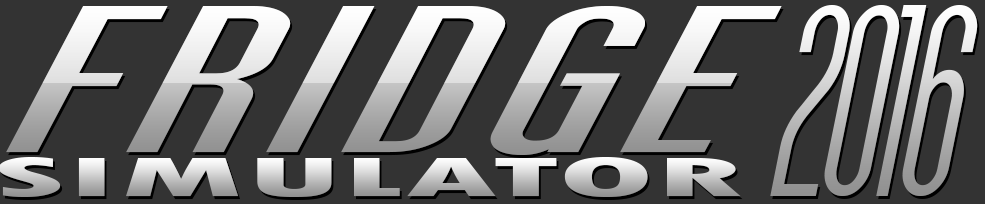
<style>
.page{position:relative;width:985px;height:204px;background:#333333}
.page>*{position:absolute;margin:0}
.t1{font:216.8px "SFMoviePoster-BoldOblique";letter-spacing:0.054em;scale:2.45 1}
.t2{font:286.6px "SFMoviePoster-Oblique";letter-spacing:-0.04em;scale:0.95 1}
.t3{font:58.9px "TwCenMT-CondensedExtraBold";scale:2.92 1}
</style>
<div class="page">
<p class="t1" style="left:6px;top:6px;width:776px;height:149px">FRIDGE</p>
<p class="t2" style="left:770px;top:5px;width:208px;height:191px">2016</p>
<p class="t3" style="left:0px;top:157px;width:741px;height:40px">SIMULATOR</p>
</div>
